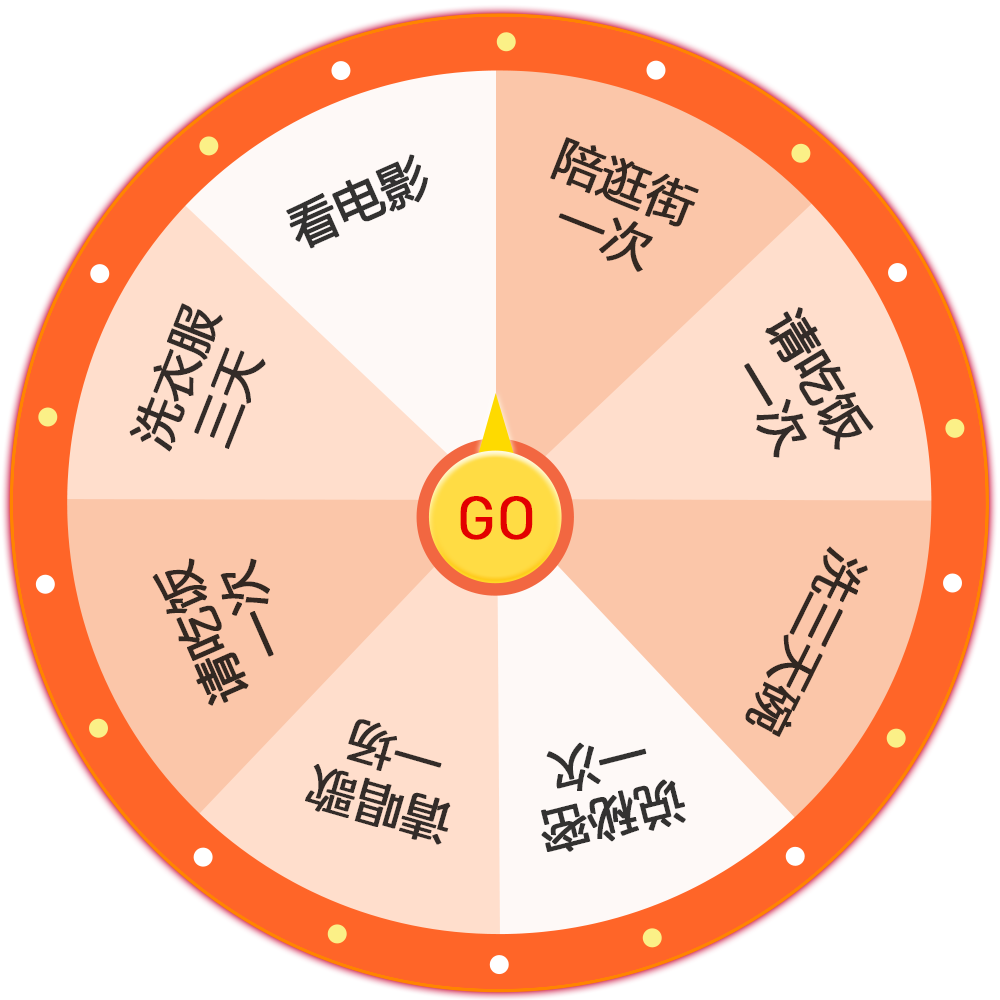
<style>
.page{position:relative;width:1000px;height:1000px;background:#ffffff}
.page>*{position:absolute;margin:0}
.t1{font:48px/56.3px "MicrosoftYaHei";color:#322822;font-weight:bold}
.t2{font:48px "MicrosoftYaHei";color:#333231;font-weight:bold}
.t3{font:48px/56.3px "MicrosoftYaHei";color:#332c29;font-weight:bold}
.t4{font:60px "DINPro-Regular";color:#e30000;font-weight:bold}
.t5{font:48px "MicrosoftYaHei";color:#322822;font-weight:bold}
.t6{font:48px/56.3px "MicrosoftYaHei";color:#333231;font-weight:bold}
</style>
<div class="page">
<p class="t1" style="left:550px;top:137px;width:149px;height:135px;text-align:center;rotate:21deg">陪逛街<br>一次</p>
<p class="t2" style="left:286px;top:154px;width:142px;height:95px;rotate:-24deg">看电影</p>
<p class="t3" style="left:129px;top:303px;width:137px;height:149px;text-align:center;rotate:-69deg">洗衣服<br>三天</p>
<p class="t3" style="left:744px;top:307px;width:130px;height:151px;text-align:center;rotate:59deg">请吃饭<br>一次</p>
<p class="t4" style="left:460px;top:496px;width:73px;height:44px">GO</p>
<p class="t1" style="left:152px;top:558px;width:122px;height:148px;text-align:center;rotate:-114deg">请吃饭<br>一次</p>
<p class="t5" style="left:745px;top:546px;width:123px;height:191px;rotate:116deg">洗三天碗</p>
<p class="t3" style="left:305px;top:719px;width:146px;height:126px;text-align:center;rotate:-164deg">请唱歌<br>一场</p>
<p class="t6" style="left:541px;top:742px;width:145px;height:110px;text-align:center;rotate:166deg">说秘密<br>一次</p>
</div>
